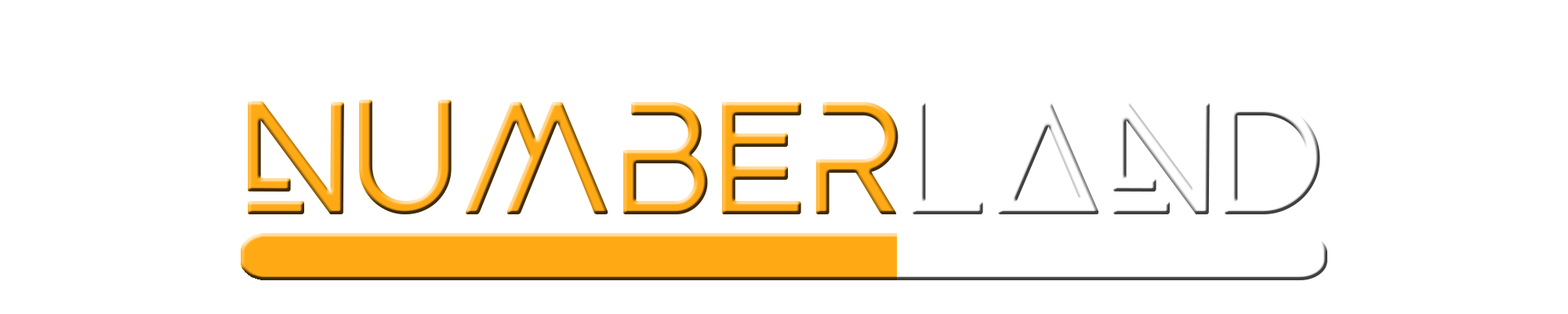
<style>
.page{position:relative;width:1568px;height:314px;background:#ffffff}
.page>*{position:absolute;margin:0}
.t1{font:156.8px "BEYNO"}
</style>
<div class="page">
<p class="t1" style="left:248px;top:100px;width:1072px;height:114px">NUMBERLAND</p>
</div>
